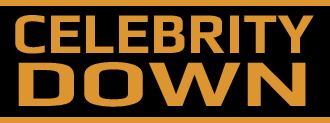
<style>
.page{position:relative;width:330px;height:123px;background:#000000}
.page>*{position:absolute;margin:0}
.t1{font:57.6px "Play-Bold";color:#dc952f}
.t2{font:66.8px "Play-Bold";color:#dc952f;scale:1.42 1}
</style>
<div class="page">
<p class="t1" style="left:15px;top:15px;width:299px;height:39px">CELEBRITY</p>
<p class="t2" style="left:18px;top:62px;width:288px;height:45px">DOWN</p>
</div>
